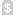
<style>
.page{position:relative;width:16px;height:16px;background:#ffffff}
.page>*{position:absolute;margin:0}
.t1{font:12px "ArialMT";color:#ffffff;font-weight:bold}
</style>
<div class="page">
<p class="t1" style="left:4px;top:3px;width:7px;height:11px">$</p>
</div>
